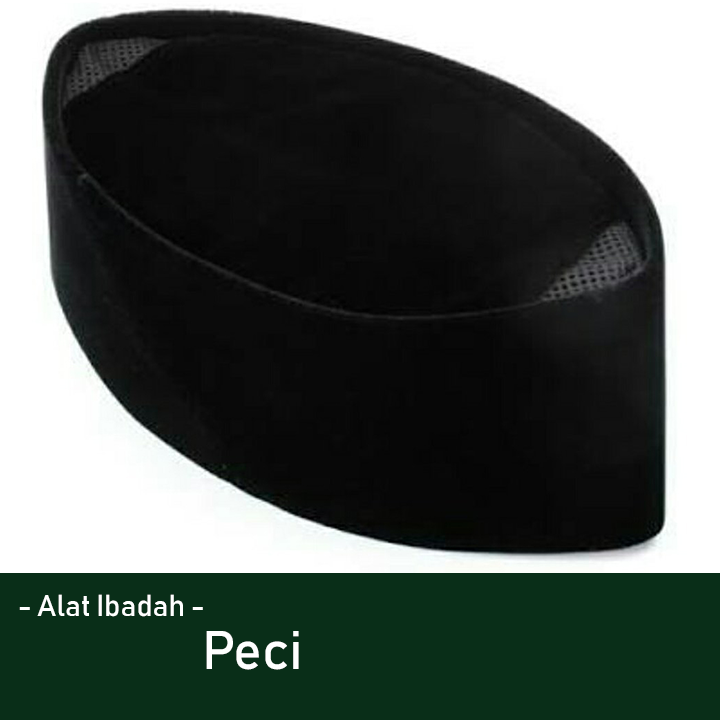
<style>
.page{position:relative;width:720px;height:720px}
.page>*{position:absolute;margin:0}
.t1{font:30px "Bahnschrift";color:#ffffff}
.t2{font:53.6px "Bahnschrift";color:#ffffff}
</style>
<div class="page">
<p class="t1" style="left:19px;top:594px;width:184px;height:23px">- Alat Ibadah -</p>
<p class="t2" style="left:206px;top:631px;width:93px;height:39px">Peci</p>
</div>
